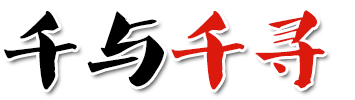
<style>
.page{position:relative;width:355px;height:100px;background:#ffffff}
.page>*{position:absolute;margin:0}
.t1{font:83.8px "-";color:#000000}
.t2{font:83.8px "-";color:#db190d}
</style>
<div class="page">
<p class="t1" style="left:3px;top:10px;width:322px;height:80px">千与<span class="t2">千寻</span></p>
</div>
